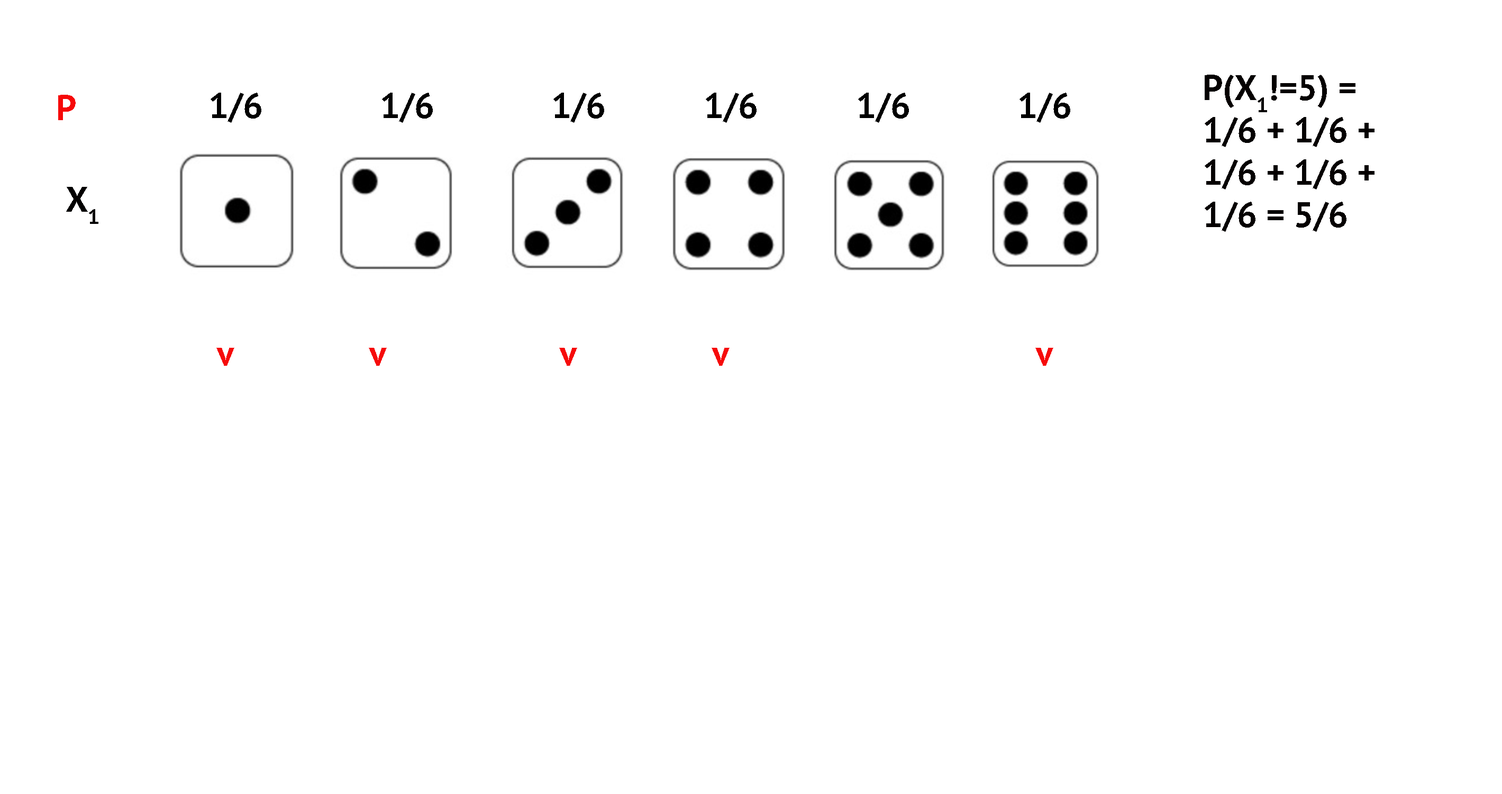
<style>
.page{position:relative;width:1502px;height:794px;background:#ffffff}
.page>*{position:absolute;margin:0}
.t1{font:35.3px "PTSans-Bold";color:#040000}
.t2{font:35.3px "PTSans-Bold";color:#f60a0a}
</style>
<div class="page">
<p class="t1" style="left:1205px;top:75px;width:170px;height:157px">P(X1!=5) = <br>1/6 + 1/6 +<br>1/6 + 1/6 +<br>1/6 = 5/6</p>
<p class="t2" style="left:216px;top:348px;width:838px;height:18px">v        v          v        v                 v</p>
</div>
